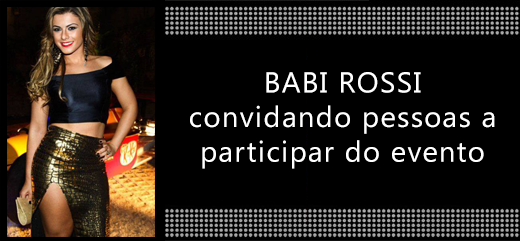
<style>
.page{position:relative;width:520px;height:241px;background:#000000}
.page>*{position:absolute;margin:0}
.t1{font:28.9px "SegoeUI";letter-spacing:0.05em;color:#ffffff}
.t2{font:28.9px "SegoeUI";letter-spacing:0.05em;color:#ffffff;text-transform:uppercase}
</style>
<div class="page">
<p class="t1" style="left:190px;top:72px;width:305px;height:97px;text-align:center"><span class="t2">Babi Rossi <br></span>convidando pessoas a participar do evento</p>
</div>
